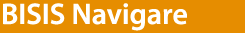
<style>
.page{position:relative;width:245px;height:33px;background:#e68d00}
.page>*{position:absolute;margin:0}
.t1{font:30px "MyriadPro-Semibold";color:#ffffff}
</style>
<div class="page">
<p class="t1" style="left:3px;top:3px;width:184px;height:28px">BISIS Navigare</p>
</div>
